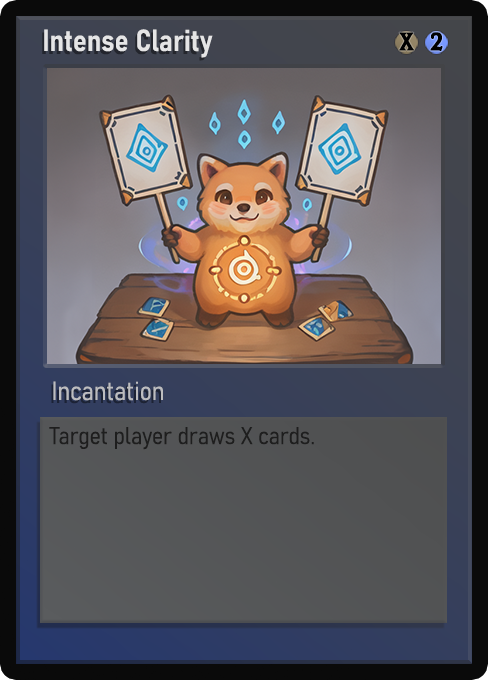
<style>
.page{position:relative;width:488px;height:680px}
.page>*{position:absolute;margin:0}
.t1{font:30px "Bahnschrift-SemiBoldSemiCondensed";color:#f2f2f2;font-weight:bold}
.t2{font:25px "WTRRoycroft";color:#000000;font-weight:bold;scale:1.09 1}
.t3{font:26px "Bahnschrift-LightSemiCondensed";color:#c8c8c8;font-weight:bold}
.t4{font:24px "Bahnschrift-LightSemiCondensed";color:#1e1e1e;font-weight:bold}
</style>
<div class="page">
<p class="t1" style="left:44px;top:29px;width:169px;height:29px;opacity:0.9">Intense Clarity</p>
<p class="t2" style="left:399px;top:32px;width:15px;height:19px">X</p>
<p class="t2" style="left:430px;top:32px;width:13px;height:19px">2</p>
<p class="t3" style="left:53px;top:381px;width:110px;height:20px;opacity:0.9">Incantation</p>
<p class="t4" style="left:49px;top:427px;width:265px;height:23px">Target player draws X cards.</p>
</div>
